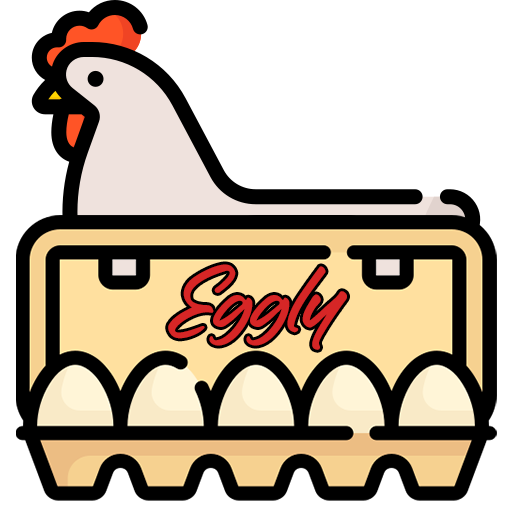
<style>
.page{position:relative;width:512px;height:512px;background:#ffffff}
.page>*{position:absolute;margin:0}
.t1{font:69.8px "HelloAmerica";color:#d62626}
</style>
<div class="page">
<p class="t1" style="left:168px;top:264px;width:179px;height:86px">Eggly</p>
</div>
